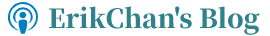
<style>
.page{position:relative;width:270px;height:36px;background:#ffffff}
.page>*{position:absolute;margin:0}
.t1{font:26px "SourceHanSerifSC-Heavy";color:#2f828c}
</style>
<div class="page">
<p class="t1" style="left:49px;top:6px;width:211px;height:29px">ErikChan's Blog</p>
</div>
